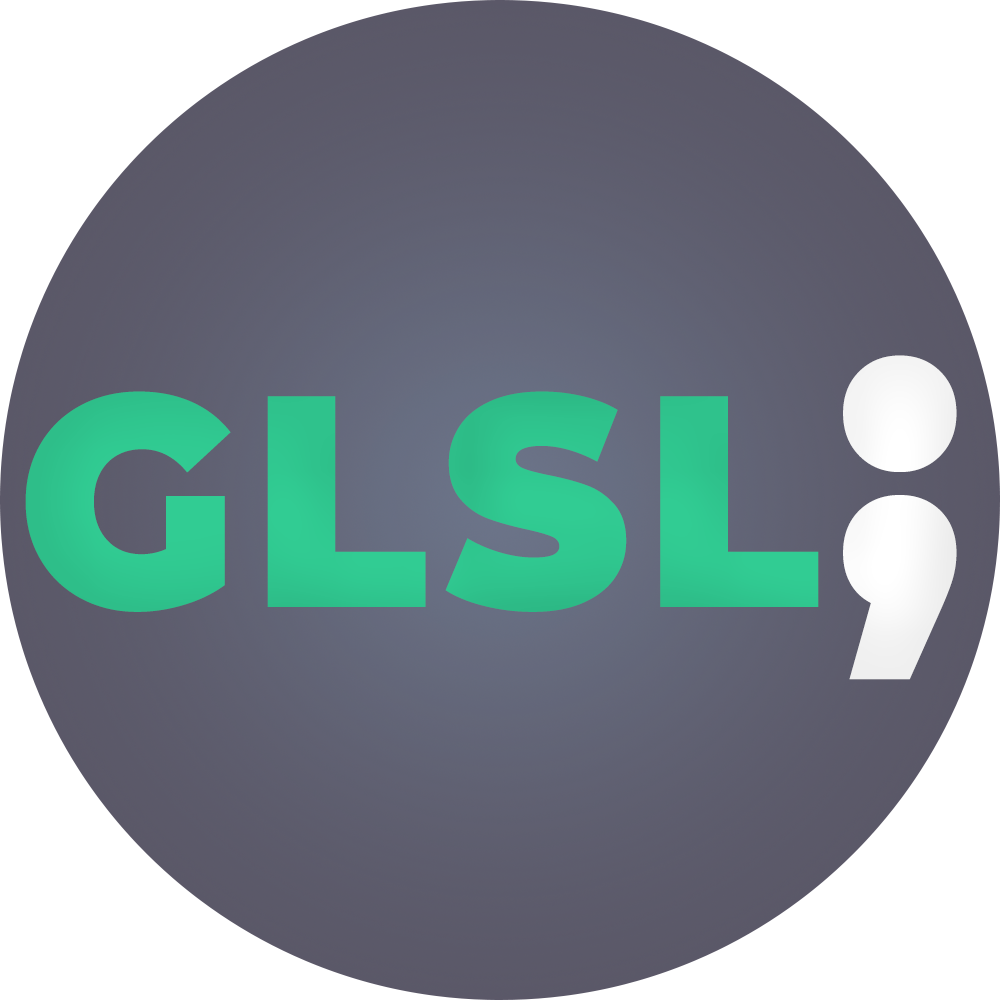
<style>
.page{position:relative;width:1000px;height:1000px;background:#ffffff}
.page>*{position:absolute;margin:0}
.t1{font:300.8px "Montserrat-Black";letter-spacing:0.05em;color:#31cc93;scale:0.95 1}
.t2{font:451.1px "Montserrat-Black";letter-spacing:0.05em;color:#ffffff;scale:0.95 1}
</style>
<div class="page">
<p class="t1" style="left:25px;top:355px;width:932px;height:325px">GLSL<span class="t2">;</span></p>
</div>
